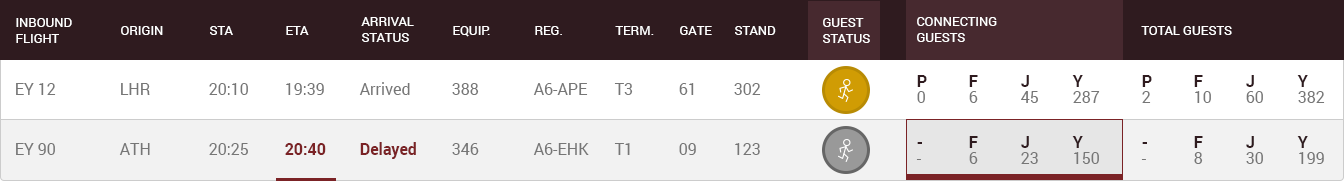
<style>
.page{position:relative;width:1344px;height:181px;background:#ffffff}
.page>*{position:absolute;margin:0}
.t1{font:13px "Roboto-Regular";color:#ffffff;text-transform:uppercase}
.t2{font:16px/16px "Roboto-Bold";color:#2f1b1f}
.t3{font:16px/16px "Roboto-Regular";color:#767676}
.t4{font:16px "Roboto-Regular";color:#767676}
.t5{font:16px "Roboto-Bold";color:#7b2326}
</style>
<div class="page">
<p class="t1" style="left:361px;top:17px;width:53px;height:25px">Arrival<br>Status</p>
<p class="t1" style="left:917px;top:17px;width:80px;height:25px">Connecting<br>Guests</p>
<p class="t1" style="left:16px;top:18px;width:56px;height:25px">Inbound<br>Flight</p>
<p class="t1" style="left:121px;top:26px;width:42px;height:9px">Origin</p>
<p class="t1" style="left:210px;top:26px;width:23px;height:9px">STA</p>
<p class="t1" style="left:286px;top:26px;width:23px;height:9px">ETA</p>
<p class="t1" style="left:453px;top:26px;width:37px;height:11px">EQuip.</p>
<p class="t1" style="left:535px;top:26px;width:27px;height:9px">Reg.</p>
<p class="t1" style="left:615px;top:26px;width:39px;height:9px">Term.</p>
<p class="t1" style="left:680px;top:26px;width:32px;height:9px">Gate</p>
<p class="t1" style="left:735px;top:26px;width:41px;height:9px">Stand</p>
<p class="t1" style="left:823px;top:18px;width:47px;height:25px">Guest<br>Status</p>
<p class="t1" style="left:1141px;top:26px;width:91px;height:9px">Total Guests</p>
<p class="t2" style="left:917px;top:75px;width:10px;height:28px">P<br><span class="t3">0</span></p>
<p class="t2" style="left:969px;top:75px;width:9px;height:28px">F<br><span class="t3">6</span></p>
<p class="t3" style="left:1021px;top:75px;width:17px;height:28px"><span class="t2">J<br></span>45</p>
<p class="t3" style="left:1072px;top:75px;width:28px;height:28px"><span class="t2">Y<br></span>287</p>
<p class="t2" style="left:1142px;top:75px;width:10px;height:28px">P<br><span class="t3">2</span></p>
<p class="t3" style="left:1194px;top:75px;width:17px;height:28px"><span class="t2">F<br></span>10</p>
<p class="t3" style="left:1246px;top:75px;width:17px;height:28px"><span class="t2">J<br></span>60</p>
<p class="t3" style="left:1297px;top:75px;width:28px;height:28px"><span class="t2">Y<br></span>382</p>
<p class="t4" style="left:16px;top:83px;width:40px;height:12px">EY 12</p>
<p class="t4" style="left:121px;top:83px;width:29px;height:12px">LHR</p>
<p class="t4" style="left:209px;top:83px;width:39px;height:12px">20:10</p>
<p class="t4" style="left:286px;top:83px;width:38px;height:12px">19:39</p>
<p class="t4" style="left:359px;top:82px;width:51px;height:13px">Arrived</p>
<p class="t4" style="left:452px;top:83px;width:27px;height:12px">388</p>
<p class="t4" style="left:533px;top:83px;width:55px;height:12px">A6-APE</p>
<p class="t4" style="left:614px;top:83px;width:19px;height:12px">T3</p>
<p class="t4" style="left:679px;top:83px;width:15px;height:12px">61</p>
<p class="t4" style="left:734px;top:83px;width:27px;height:12px">302</p>
<p class="t2" style="left:969px;top:136px;width:9px;height:28px">F<br><span class="t3">6</span></p>
<p class="t3" style="left:1021px;top:136px;width:17px;height:28px"><span class="t2">J<br></span>23</p>
<p class="t3" style="left:1072px;top:136px;width:27px;height:28px"><span class="t2">Y<br></span>150</p>
<p class="t2" style="left:1194px;top:136px;width:9px;height:28px">F<br><span class="t3">8</span></p>
<p class="t3" style="left:1246px;top:136px;width:17px;height:28px"><span class="t2">J<br></span>30</p>
<p class="t3" style="left:1297px;top:136px;width:27px;height:28px"><span class="t2">Y<br></span>199</p>
<p class="t4" style="left:16px;top:143px;width:39px;height:12px">EY 90</p>
<p class="t4" style="left:119px;top:143px;width:31px;height:12px">ATH</p>
<p class="t4" style="left:209px;top:143px;width:39px;height:12px">20:25</p>
<p class="t5" style="left:285px;top:143px;width:41px;height:12px">20:40</p>
<p class="t5" style="left:360px;top:142px;width:56px;height:17px">Delayed</p>
<p class="t4" style="left:452px;top:143px;width:27px;height:12px">346</p>
<p class="t4" style="left:533px;top:143px;width:56px;height:12px">A6-EHK</p>
<p class="t4" style="left:614px;top:143px;width:16px;height:12px">T1</p>
<p class="t4" style="left:679px;top:143px;width:17px;height:12px">09</p>
<p class="t4" style="left:735px;top:143px;width:25px;height:12px">123</p>
<p class="t2" style="left:916px;top:142px;width:6px;height:18px">-<br><span class="t3">-</span></p>
<p class="t2" style="left:1141px;top:142px;width:6px;height:18px">-<br><span class="t3">-</span></p>
</div>
